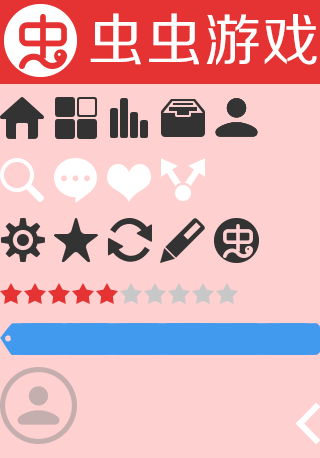
<style>
.page{position:relative;width:320px;height:458px;background:#ffd0d0}
.page>*{position:absolute;margin:0}
.t1{font:56.2px "FZZHJW--GB1-0";letter-spacing:0.01em;color:#fffefe;font-weight:bold}
</style>
<div class="page">
<p class="t1" style="left:90px;top:13px;width:227px;height:52px">虫虫游戏</p>
</div>
